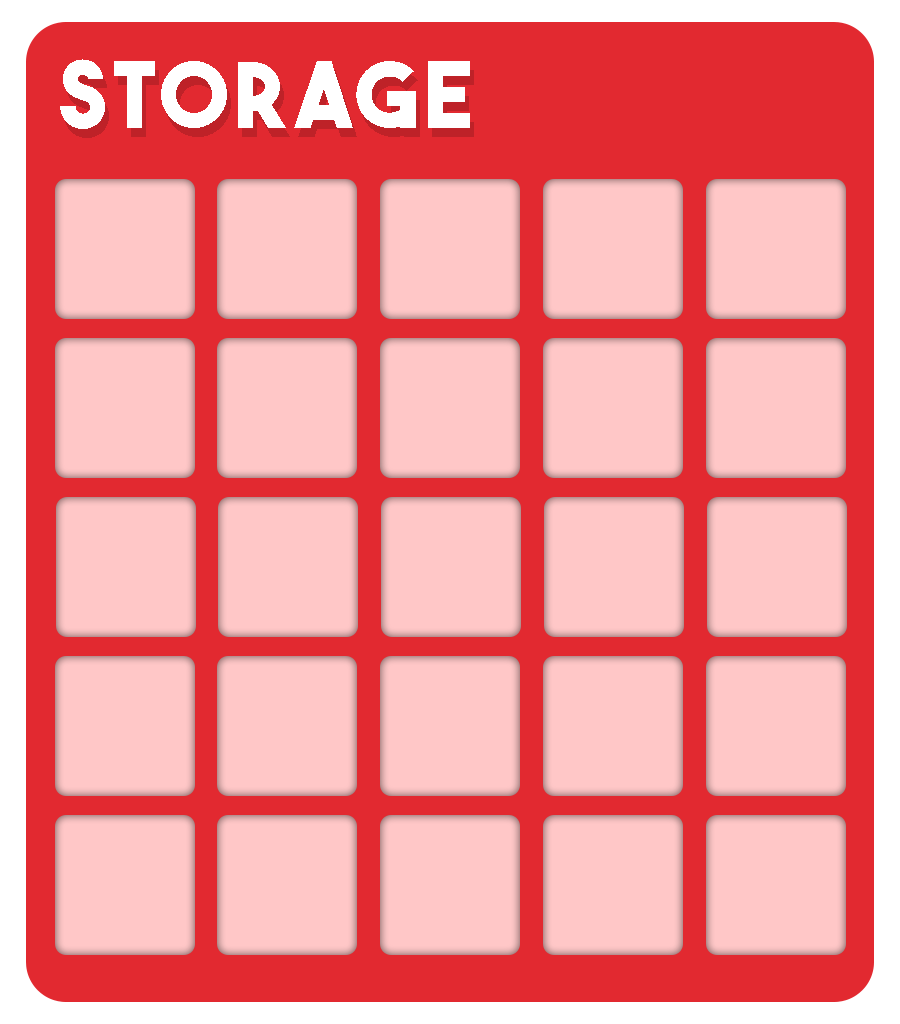
<style>
.page{position:relative;width:900px;height:1024px;background:#ffc7c7}
.page>*{position:absolute;margin:0}
.t1{font:91.3px "TheBoldFont";letter-spacing:0.05em;color:#ffffff}
</style>
<div class="page">
<p class="t1" style="left:60px;top:59px;width:410px;height:70px">Storage</p>
</div>
